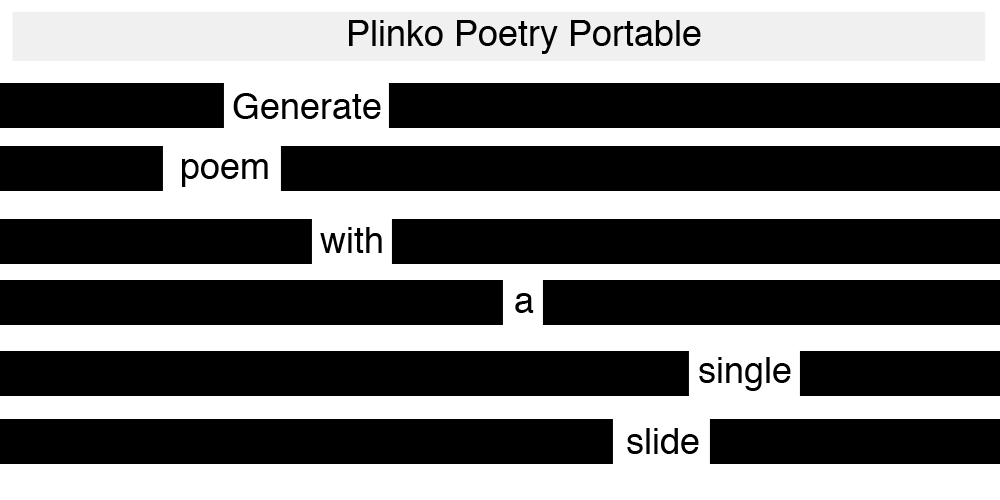
<style>
.page{position:relative;width:1000px;height:500px;background:#000000}
.page>*{position:absolute;margin:0}
.t1{font:36px "Helvetica";color:#000000}
</style>
<div class="page">
<p class="t1" style="left:349px;top:20px;width:352px;height:34px">Plinko Poetry Portable</p>
<p class="t1" style="left:233px;top:93px;width:148px;height:26px">Generate</p>
<p class="t1" style="left:182px;top:159px;width:86px;height:28px">poem</p>
<p class="t1" style="left:320px;top:227px;width:62px;height:26px">with</p>
<p class="t1" style="left:515px;top:293px;width:19px;height:20px">a</p>
<p class="t1" style="left:699px;top:357px;width:92px;height:34px">single</p>
<p class="t1" style="left:627px;top:428px;width:72px;height:26px">slide</p>
</div>
